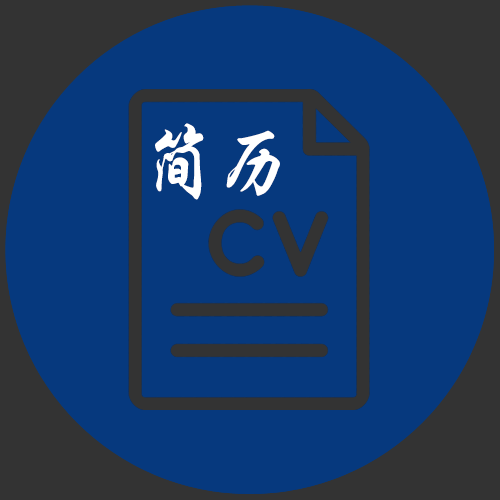
<style>
.page{position:relative;width:500px;height:500px;background:#06397e}
.page>*{position:absolute;margin:0}
.t1{font:80px "STXingkai";color:#ffffff}
</style>
<div class="page">
<p class="t1" style="left:155px;top:123px;width:125px;height:77px">简历</p>
</div>
